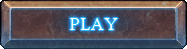
<style>
.page{position:relative;width:187px;height:49px}
.page>*{position:absolute;margin:0}
.t1{font:18px "HighTowerText-Reg";color:#ffffff}
</style>
<div class="page">
<p class="t1" style="left:70px;top:18px;width:48px;height:12px">PLAY</p>
<p class="t1" style="left:70px;top:18px;width:48px;height:12px">PLAY</p>
</div>
